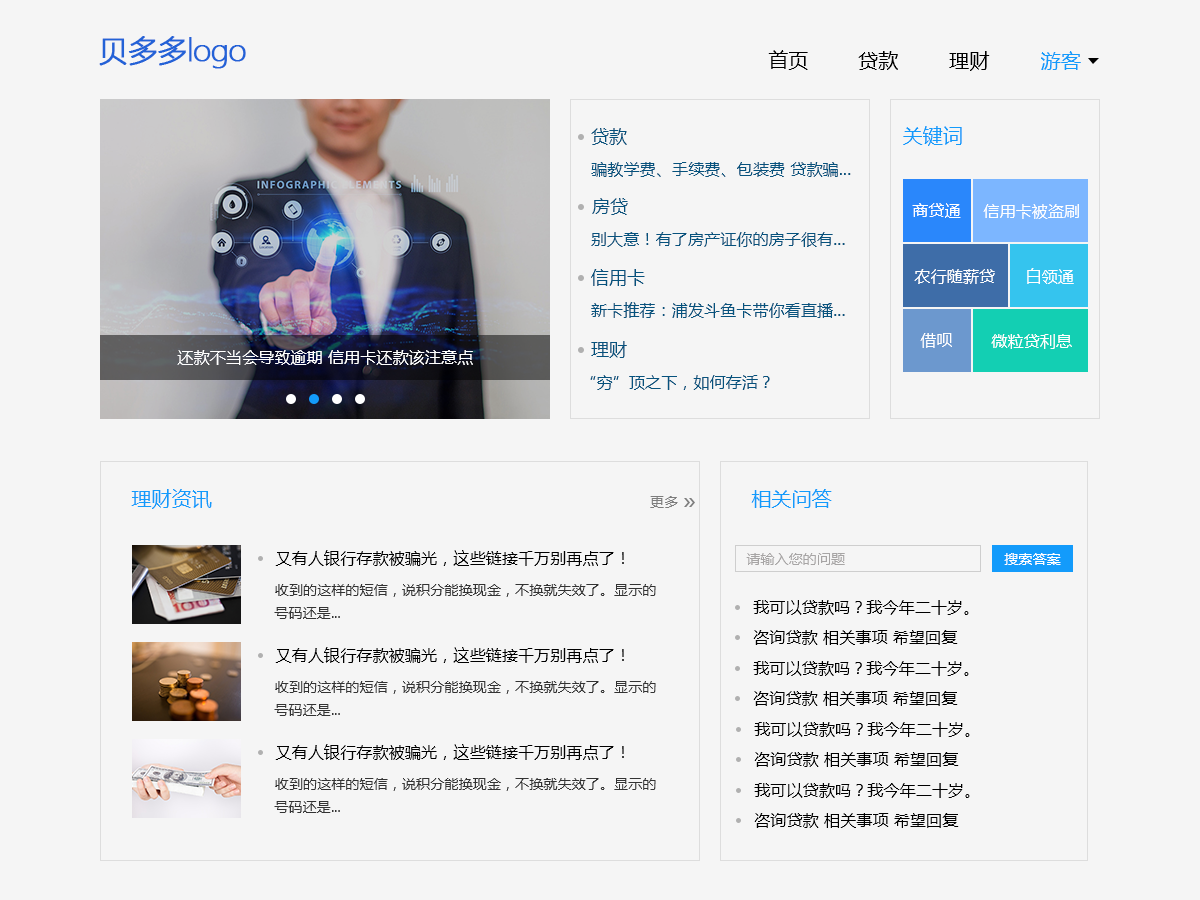
<style>
.page{position:relative;width:1200px;height:900px;background:#f5f5f5}
.page>*{position:absolute;margin:0}
.t1{font:30px "MicrosoftYaHeiLight";letter-spacing:-0.05em;color:#2362d7;font-weight:bold}
.t2{font:20px "MicrosoftYaHei";letter-spacing:0.01em;color:#000000}
.t3{font:20px "MicrosoftYaHei";letter-spacing:0.01em;color:#139bfb}
.t4{font:18px "MicrosoftYaHei";letter-spacing:0.01em;color:#06527d}
.t5{font:16px "MicrosoftYaHei";letter-spacing:0.01em;color:#06527d}
.t6{font:16px "MicrosoftYaHei";letter-spacing:0.01em;color:#ffffff}
.t7{font:14px "MicrosoftYaHei";letter-spacing:0.01em;color:#7d7d7d}
.t8{font:16px "MicrosoftYaHei";letter-spacing:0.01em;color:#000000}
.t9{font:14px "MicrosoftYaHei";letter-spacing:0.01em;color:#a7a5a5}
.t10{font:14px "MicrosoftYaHei";letter-spacing:0.01em;color:#ffffff}
.t11{font:14px "MicrosoftYaHei";letter-spacing:0.01em;color:#333333}
</style>
<div class="page">
<p class="t1" style="left:99px;top:36px;width:147px;height:33px">贝多多logo</p>
<p class="t2" style="left:768px;top:50px;width:40px;height:20px">首页</p>
<p class="t2" style="left:858px;top:51px;width:40px;height:19px">贷款</p>
<p class="t2" style="left:949px;top:51px;width:41px;height:20px">理财</p>
<p class="t3" style="left:1041px;top:51px;width:40px;height:19px">游客</p>
<p class="t3" style="left:903px;top:126px;width:59px;height:20px">关键词</p>
<p class="t4" style="left:591px;top:128px;width:36px;height:17px">贷款</p>
<p class="t5" style="left:591px;top:162px;width:260px;height:15px">骗教学费、手续费、包装费 贷款骗...</p>
<p class="t4" style="left:592px;top:198px;width:36px;height:17px">房贷</p>
<p class="t6" style="left:912px;top:203px;width:49px;height:15px">商贷通</p>
<p class="t6" style="left:983px;top:204px;width:96px;height:15px">信用卡被盗刷</p>
<p class="t5" style="left:591px;top:232px;width:254px;height:15px">别大意！有了房产证你的房子很有...</p>
<p class="t4" style="left:591px;top:269px;width:54px;height:17px">信用卡</p>
<p class="t6" style="left:914px;top:269px;width:81px;height:15px">农行随薪贷</p>
<p class="t6" style="left:1027px;top:268px;width:47px;height:16px">白领通</p>
<p class="t5" style="left:591px;top:302px;width:254px;height:16px">新卡推荐：浦发斗鱼卡带你看直播...</p>
<p class="t4" style="left:591px;top:341px;width:36px;height:17px">理财</p>
<p class="t6" style="left:920px;top:333px;width:32px;height:15px">借呗</p>
<p class="t6" style="left:991px;top:334px;width:81px;height:15px">微粒贷利息</p>
<p class="t6" style="left:177px;top:350px;width:296px;height:15px">还款不当会导致逾期 信用卡还款该注意点</p>
<p class="t5" style="left:590px;top:375px;width:180px;height:15px">“穷”顶之下，如何存活？</p>
<p class="t3" style="left:131px;top:489px;width:81px;height:20px">理财资讯</p>
<p class="t7" style="left:650px;top:496px;width:28px;height:12px">更多</p>
<p class="t3" style="left:751px;top:489px;width:81px;height:19px">相关问答</p>
<p class="t8" style="left:275px;top:550px;width:349px;height:16px">又有人银行存款被骗光，这些链接千万别再点了！</p>
<p class="t9" style="left:746px;top:553px;width:99px;height:12px">请输入您的问题</p>
<p class="t10" style="left:1004px;top:553px;width:57px;height:12px">搜索答案</p>
<p class="t11" style="left:275px;top:584px;width:381px;height:13px">收到的这样的短信，说积分能换现金，不换就失效了。显示的</p>
<p class="t8" style="left:753px;top:600px;width:216px;height:15px">我可以贷款吗？我今年二十岁。</p>
<p class="t11" style="left:274px;top:607px;width:66px;height:12px">号码还是...</p>
<p class="t8" style="left:753px;top:630px;width:205px;height:15px">咨询贷款 相关事项 希望回复</p>
<p class="t8" style="left:275px;top:647px;width:349px;height:16px">又有人银行存款被骗光，这些链接千万别再点了！</p>
<p class="t8" style="left:753px;top:661px;width:216px;height:15px">我可以贷款吗？我今年二十岁。</p>
<p class="t11" style="left:275px;top:681px;width:381px;height:13px">收到的这样的短信，说积分能换现金，不换就失效了。显示的</p>
<p class="t8" style="left:753px;top:691px;width:205px;height:15px">咨询贷款 相关事项 希望回复</p>
<p class="t11" style="left:274px;top:704px;width:66px;height:12px">号码还是...</p>
<p class="t8" style="left:754px;top:722px;width:216px;height:15px">我可以贷款吗？我今年二十岁。</p>
<p class="t8" style="left:275px;top:744px;width:349px;height:16px">又有人银行存款被骗光，这些链接千万别再点了！</p>
<p class="t8" style="left:754px;top:752px;width:205px;height:15px">咨询贷款 相关事项 希望回复</p>
<p class="t11" style="left:275px;top:778px;width:381px;height:13px">收到的这样的短信，说积分能换现金，不换就失效了。显示的</p>
<p class="t8" style="left:754px;top:783px;width:216px;height:15px">我可以贷款吗？我今年二十岁。</p>
<p class="t11" style="left:274px;top:801px;width:66px;height:12px">号码还是...</p>
<p class="t8" style="left:754px;top:813px;width:205px;height:15px">咨询贷款 相关事项 希望回复</p>
</div>
